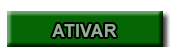
<style>
.page{position:relative;width:170px;height:47px;background:#046704}
.page>*{position:absolute;margin:0}
.t1{font:18px "Arial-BoldMT";color:#92b192}
</style>
<div class="page">
<p class="t1" style="left:52px;top:24px;width:65px;height:13px">ATIVAR</p>
</div>
